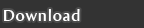
<style>
.page{position:relative;width:144px;height:28px;background:#333333}
.page>*{position:absolute;margin:0}
.t1{font:16px "AmiraParadiso";letter-spacing:0.05em;color:#ffffff}
</style>
<div class="page">
<p class="t1" style="left:4px;top:9px;width:76px;height:12px">Download</p>
</div>
